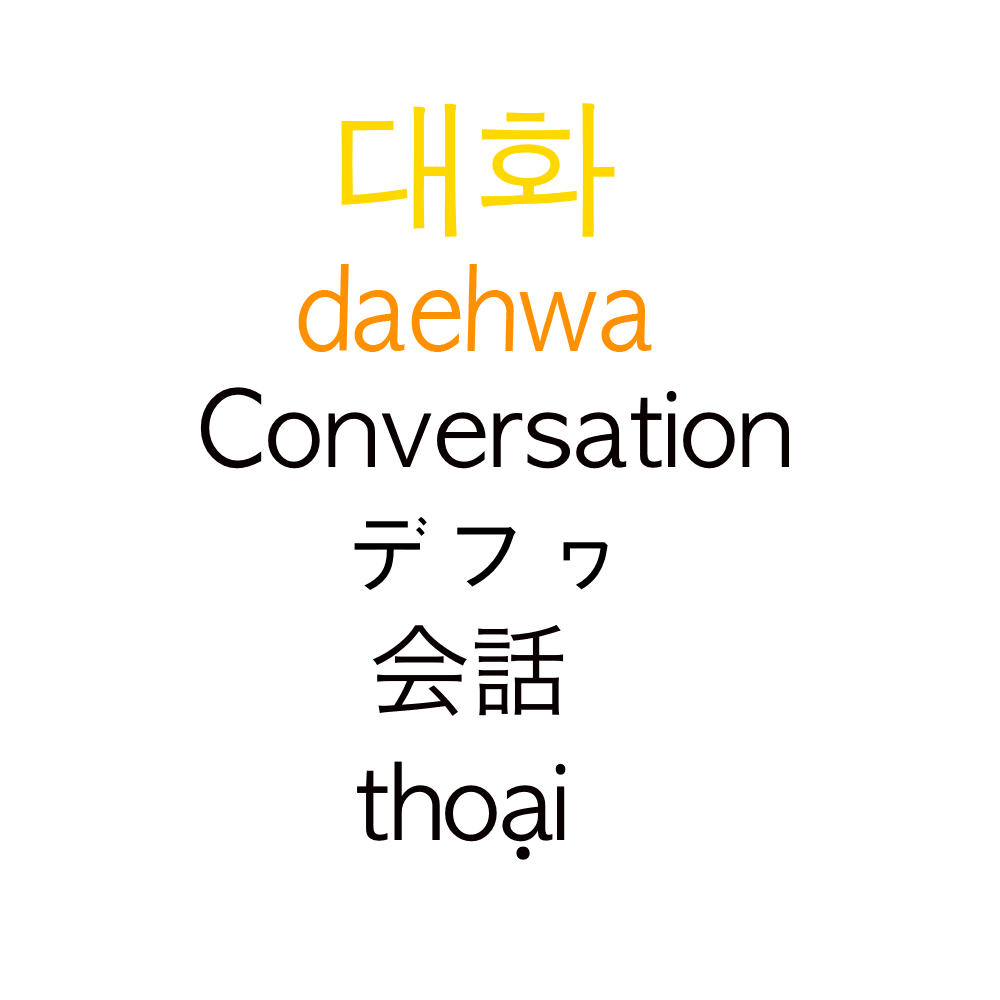
<style>
.page{position:relative;width:1000px;height:1000px;background:#ffffff}
.page>*{position:absolute;margin:0}
.t1{font:150px "AppleGothic";color:#ffd800}
.t2{font:111.2px "AppleGothic";color:#ff9000;scale:0.9 1}
.t3{font:100px "AppleGothic";color:#080000}
.t4{font:100px "AppleGothic";color:#000000}
.t5{font:100px "HiraKakuProN-W3";color:#080000}
</style>
<div class="page">
<p class="t1" style="left:341px;top:103px;width:274px;height:134px">대화</p>
<p class="t2" style="left:298px;top:264px;width:354px;height:88px">daehwa</p>
<p class="t3" style="left:200px;top:387px;width:589px;height:82px">Conversation</p>
<p class="t4" style="left:354px;top:517px;width:254px;height:73px">デフヮ</p>
<p class="t5" style="left:373px;top:624px;width:191px;height:92px">会話</p>
<p class="t3" style="left:357px;top:761px;width:209px;height:99px">thoại</p>
</div>
